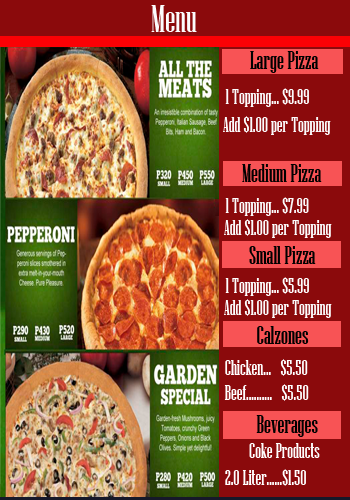
<style>
.page{position:relative;width:350px;height:500px;background:#8b0a0c}
.page>*{position:absolute;margin:0}
.t1{font:37.5px "NiagaraSolid-Reg";color:#fcfcfd}
.t2{font:25px "NiagaraSolid-Reg";color:#000000}
.t3{font:20.8px "NiagaraSolid-Reg";color:#fcfcfd}
.t4{font:25px "NiagaraSolid-Reg";color:#010000}
.t5{font:20.8px "NiagaraSolid-Reg";color:#ffffff}
</style>
<div class="page">
<p class="t1" style="left:151px;top:5px;width:46px;height:27px">Menu</p>
<p class="t2" style="left:250px;top:51px;width:69px;height:22px">Large Pizza</p>
<p class="t3" style="left:225px;top:88px;width:84px;height:19px">1 Topping... $9.99</p>
<p class="t4" style="left:242px;top:164px;width:80px;height:18px">Medium Pizza</p>
<p class="t3" style="left:225px;top:197px;width:84px;height:19px">1 Topping... $7.99</p>
<p class="t4" style="left:249px;top:246px;width:67px;height:18px">Small Pizza</p>
<p class="t5" style="left:225px;top:277px;width:84px;height:19px">1 Topping... $5.99</p>
<p class="t2" style="left:257px;top:326px;width:52px;height:18px">Calzones</p>
<p class="t5" style="left:224px;top:359px;width:85px;height:42px">Chicken...   $5.50<br>Beef..........   $5.50</p>
<p class="t2" style="left:256px;top:415px;width:62px;height:22px">Beverages</p>
<p class="t5" style="left:249px;top:443px;width:71px;height:15px">Coke Products</p>
<p class="t5" style="left:225px;top:469px;width:81px;height:17px">2.0 Liter......$1.50</p>
</div>
